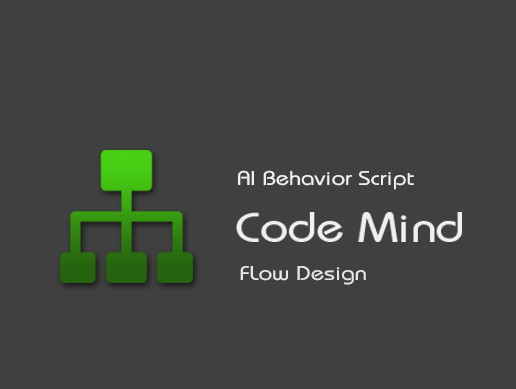
<style>
.page{position:relative;width:516px;height:389px;background:#404040}
.page>*{position:absolute;margin:0}
.t1{font:20px "Celevenia-ExpandedRegular";color:#efefef}
.t2{font:20px "Celevenia-ExpandedRegular";color:#e6e6e6}
</style>
<div class="page">
<p class="t1" style="left:238px;top:170px;width:176px;height:20px">AI Behavior Script</p>
<p class="t2" style="left:240px;top:266px;width:126px;height:19px">FLow Design</p>
</div>
